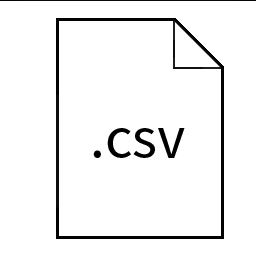
<style>
.page{position:relative;width:256px;height:256px;background:#ffffff}
.page>*{position:absolute;margin:0}
.t1{font:60px "SourceSansPro-Regular";color:#000000}
</style>
<div class="page">
<p class="t1" style="left:93px;top:127px;width:92px;height:30px">.csv</p>
</div>
